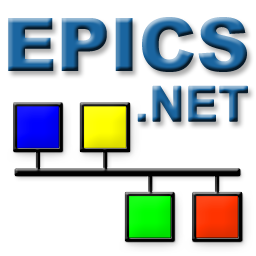
<style>
.page{position:relative;width:256px;height:256px;background:#ffffff}
.page>*{position:absolute;margin:0}
.t1{font:74px "Arial-Black"}
.t2{font:48px "Arial-BoldMT";font-weight:bold}
</style>
<div class="page">
<p class="t1" style="left:8px;top:17px;width:239px;height:55px">EPICS</p>
<p class="t2" style="left:137px;top:85px;width:111px;height:37px">.NET</p>
</div>
